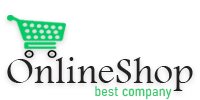
<style>
.page{position:relative;width:200px;height:100px;background:#ffffff}
.page>*{position:absolute;margin:0}
.t1{font:38px "FootlightMTLight";letter-spacing:0.01em;color:#232121}
.t2{font:14px "Bahnschrift-SemiLightSemiCondensed";letter-spacing:0.01em;color:#3dca6c}
</style>
<div class="page">
<p class="t1" style="left:7px;top:57px;width:186px;height:34px">OnlineShop</p>
<p class="t2" style="left:95px;top:85px;width:77px;height:15px">best company</p>
</div>
